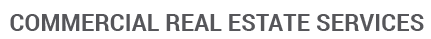
<style>
.page{position:relative;width:431px;height:39px;background:#ffffff}
.page>*{position:absolute;margin:0}
.t1{font:23px "Roboto-Bold";letter-spacing:0.01em;color:#56565a}
</style>
<div class="page">
<p class="t1" style="left:10px;top:14px;width:414px;height:17px">COMMERCIAL REAL ESTATE SERVICES</p>
</div>
